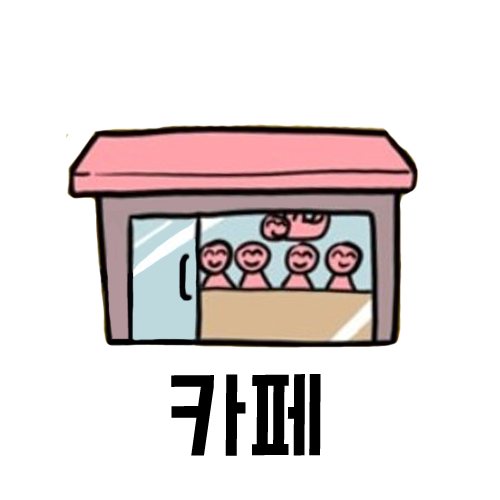
<style>
.page{position:relative;width:500px;height:500px;background:#ffffff}
.page>*{position:absolute;margin:0}
.t1{font:85.8px "BMDoHyeon";color:#000000;scale:0.96 1}
</style>
<div class="page">
<p class="t1" style="left:171px;top:374px;width:150px;height:82px">카페</p>
</div>
